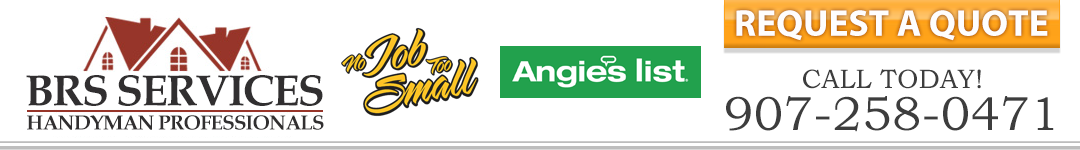
<style>
.page{position:relative;width:1080px;height:150px;background:#ffffff}
.page>*{position:absolute;margin:0}
.t1{font:37.4px "MyriadPro-Bold";color:#fefdfd}
.t2{font:43.6px "BookAntiqua-Bold";letter-spacing:-0.04em;color:#312f30}
.t3{font:26.8px "BookmanOldStyle";color:#3d3d3d}
.t4{font:26.8px "MyriadPro-Regular";color:#323030}
.t5{font:47.9px "BookmanOldStyle";color:#3d3d3d}
.t6{font:20.5px "BookAntiqua-Bold";letter-spacing:-0.04em;color:#312f30}
</style>
<div class="page">
<p class="t1" style="left:736px;top:10px;width:312px;height:31px">REQUEST A QUOTE</p>
<p class="t2" style="left:26px;top:75px;width:297px;height:31px">BRS SERVICES</p>
<p class="t3" style="left:803px;top:69px;width:178px;height:20px"><span class="t4"><br></span>CALL TODAY!</p>
<p class="t5" style="left:726px;top:96px;width:328px;height:36px">907-258-0471</p>
<p class="t6" style="left:27px;top:115px;width:297px;height:15px">HANDYMAN PROFESSIONALS</p>
</div>
